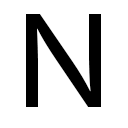
<style>
.page{position:relative;width:128px;height:128px;background:#ffffff}
.page>*{position:absolute;margin:0}
.t1{font:138px "MyriadPro-Regular";color:#000000;scale:1.07 1}
</style>
<div class="page">
<p class="t1" style="left:26px;top:14px;width:75px;height:93px">N</p>
</div>
